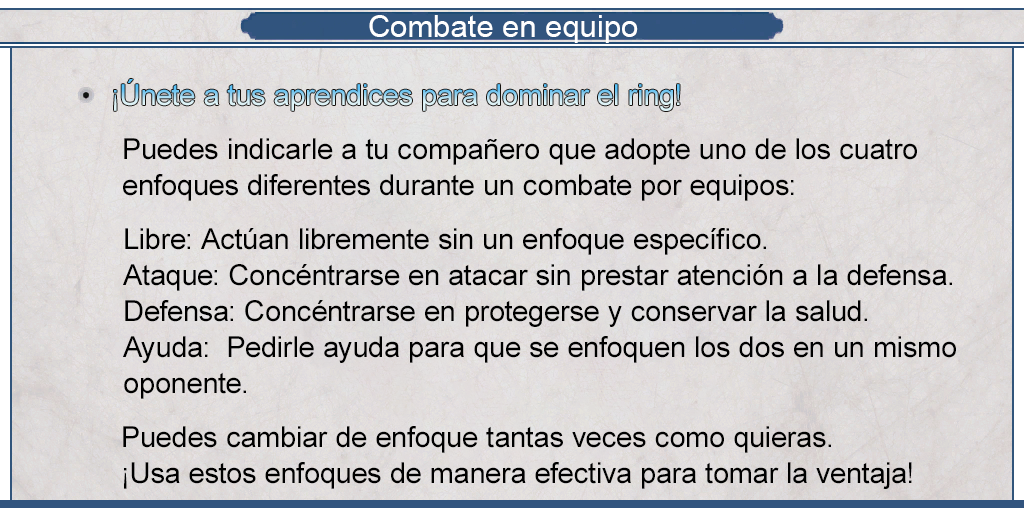
<style>
.page{position:relative;width:1024px;height:512px}
.page>*{position:absolute;margin:0}
.t1{font:30.8px "ArialMT";color:#ffffff}
.t2{font:29px/36px "ArialMT";color:#000000}
</style>
<div class="page">
<p class="t1" style="left:369px;top:15px;width:269px;height:28px">Combate en equipo</p>
<p class="t2" style="left:123px;top:138px;width:794px;height:63px">Puedes indicarle a tu compañero que adopte uno de los cuatro <br>enfoques diferentes durante un combate por equipos:</p>
<p class="t2" style="left:123px;top:228px;width:833px;height:171px">Libre: Actúan libremente sin un enfoque específico.<br>Ataque: Concéntrarse en atacar sin prestar atención a la defensa.<br>Defensa: Concéntrarse en protegerse y conservar la salud.<br>Ayuda:  Pedirle ayuda para que se enfoquen los dos en un mismo <br>oponente.</p>
<p class="t2" style="left:123px;top:426px;width:789px;height:63px">Puedes cambiar de enfoque tantas veces como quieras. <br>¡Usa estos enfoques de manera efectiva para tomar la ventaja!</p>
</div>
